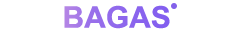
<style>
.page{position:relative;width:239px;height:35px;background:#ffffff}
.page>*{position:absolute;margin:0}
.t1{font:30px "Arial-BoldMT";color:#9069ec}
</style>
<div class="page">
<p class="t1" style="left:64px;top:5px;width:106px;height:24px">BAGAS</p>
</div>
